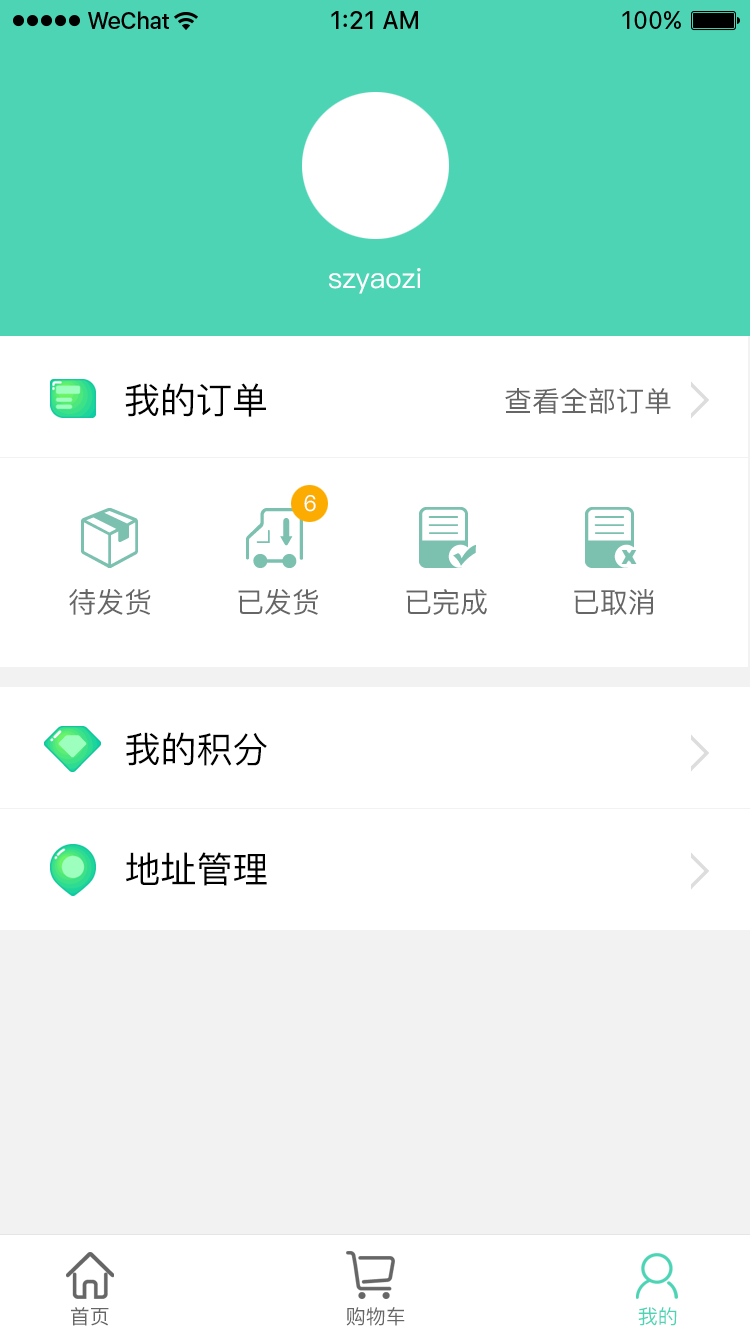
<style>
.page{position:relative;width:750px;height:1334px;background:#ffffff}
.page>*{position:absolute;margin:0}
.t1{font:28px "PingFang-SC-Medium";color:#ffffff}
.t2{font:36px "PingFang-SC-Medium";color:#000000}
.t3{font:28px "PingFang-SC-Medium";color:#666666}
.t4{font:22px "PingFang-SC-Medium";color:#ffffff}
.t5{font:36px/120px "PingFang-SC-Medium";color:#000000}
.t6{font:20px "PingFang-SC-Medium";color:#666666}
.t7{font:20px "PingFang-SC-Medium";color:#4cd4b4}
</style>
<div class="page">
<p class="t1" style="left:329px;top:268px;width:92px;height:26px">szyaozi</p>
<p class="t2" style="left:125px;top:383px;width:141px;height:34px">我的订单</p>
<p class="t3" style="left:505px;top:388px;width:166px;height:26px">查看全部订单</p>
<p class="t4" style="left:304px;top:495px;width:12px;height:17px">6</p>
<p class="t3" style="left:69px;top:589px;width:585px;height:26px">待发货         已发货         已完成         已取消</p>
<p class="t5" style="left:126px;top:732px;width:141px;height:154px">我的积分<br>地址管理</p>
<p class="t6" style="left:71px;top:1307px;width:38px;height:19px">首页</p>
<p class="t6" style="left:346px;top:1307px;width:59px;height:19px">购物车</p>
<p class="t7" style="left:638px;top:1307px;width:39px;height:19px">我的</p>
</div>
